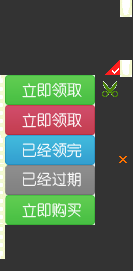
<style>
.page{position:relative;width:133px;height:271px;background:#333333}
.page>*{position:absolute;margin:0}
.t1{font:15px "YouYuan";color:#ffffff}
.t2{font:15px "YouYuan"}
</style>
<div class="page">
<p class="t1" style="left:22px;top:83px;width:60px;height:15px">立即领取</p>
<p class="t1" style="left:22px;top:113px;width:60px;height:15px">立即领取</p>
<p class="t2" style="left:22px;top:143px;width:60px;height:15px">已经领完</p>
<p class="t1" style="left:22px;top:172px;width:59px;height:15px">已经过期</p>
<p class="t1" style="left:22px;top:203px;width:59px;height:15px">立即购买</p>
</div>
